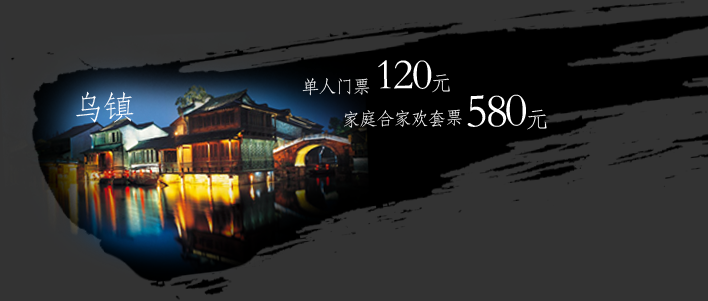
<style>
.page{position:relative;width:708px;height:301px;background:#333333}
.page>*{position:absolute;margin:0}
.t1{font:44px "STFangsong";letter-spacing:-0.05em;color:#ffffff}
.t2{font:21.7px "STFangsong";letter-spacing:-0.05em;color:#ffffff}
.t3{font:18.1px "STFangsong";letter-spacing:-0.05em;color:#ffffff}
.t4{font:33px "STFangsong";letter-spacing:-0.05em;color:#ffffff}
.t5{font:48px "STFangsong";letter-spacing:-0.05em;color:#ffffff}
.t6{font:23.6px "STFangsong";letter-spacing:-0.05em;color:#ffffff}
</style>
<div class="page">
<p class="t1" style="left:378px;top:60px;width:72px;height:33px;rotate:-1deg">120<span class="t2">元</span></p>
<p class="t3" style="left:302px;top:78px;width:68px;height:18px;rotate:-1deg">单人门票</p>
<p class="t4" style="left:76px;top:91px;width:58px;height:32px">乌镇</p>
<p class="t5" style="left:467px;top:94px;width:80px;height:36px;rotate:-1deg">580<span class="t6">元</span></p>
<p class="t3" style="left:344px;top:109px;width:118px;height:19px;rotate:-1deg">家庭合家欢套票</p>
</div>
